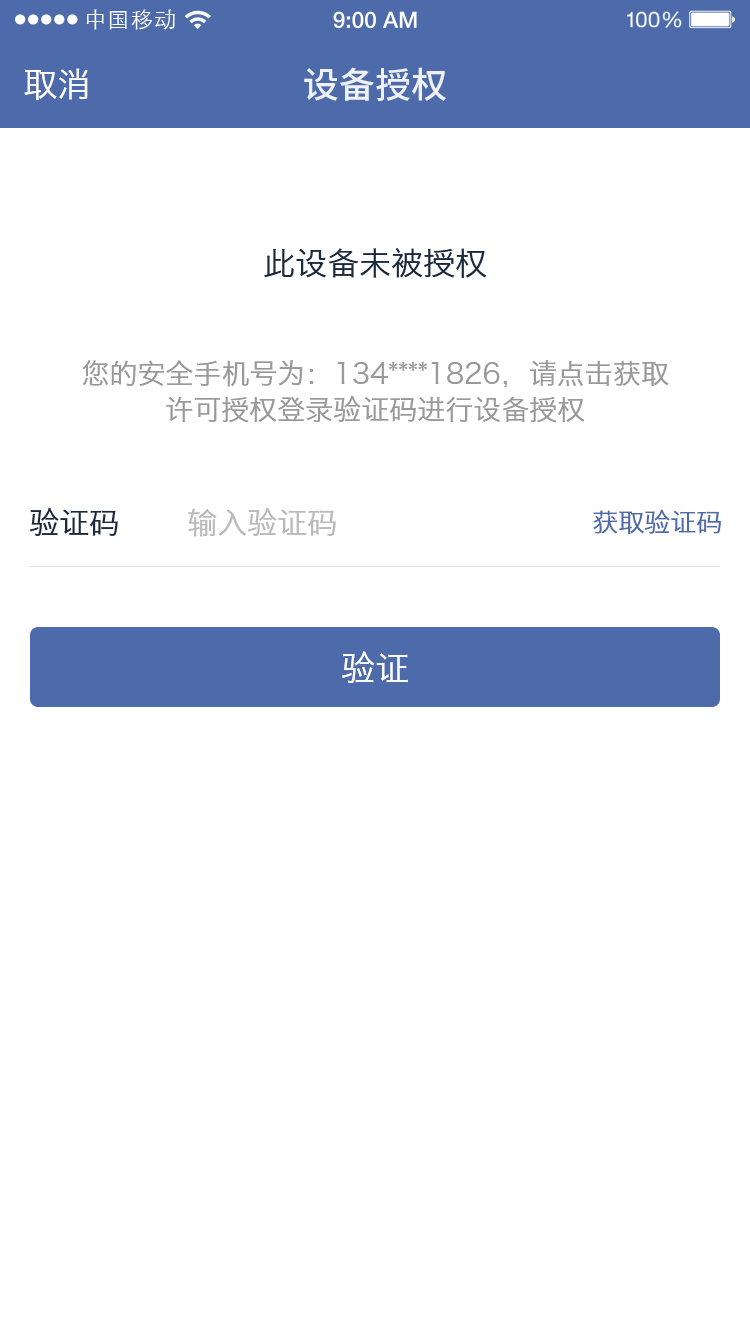
<style>
.page{position:relative;width:750px;height:1334px;background:#ffffff}
.page>*{position:absolute;margin:0}
.t1{font:21.9px "STXihei";letter-spacing:0.04em;color:#ffffff}
.t2{font:34px "HiraginoSansGB-W3";color:#ffffff}
.t3{font:36px "NotoSansHans-Medium";color:#eef1f6}
.t4{font:32px "HiraginoSansGB-W3";color:#1a293e}
.t5{font:28px/36px "HiraginoSansGB-W3";color:#999999}
.t6{font:30px "HiraginoSansGB-W3";color:#1a293e}
.t7{font:30px "HiraginoSansGB-W3";color:#bababa}
.t8{font:26px "HiraginoSansGB-W3";color:#4d6bab}
</style>
<div class="page">
<p class="t1" style="left:86px;top:9px;width:89px;height:21px">中国移动</p>
<p class="t2" style="left:24px;top:68px;width:64px;height:32px">取消</p>
<p class="t3" style="left:304px;top:67px;width:142px;height:34px">设备授权</p>
<p class="t4" style="left:264px;top:248px;width:223px;height:30px">此设备未被授权</p>
<p class="t5" style="left:82px;top:360px;width:587px;height:63px;text-align:center">您的安全手机号为：134****1826，请点击获取<br>许可授权登录验证码进行设备授权</p>
<p class="t6" style="left:30px;top:507px;width:88px;height:29px">验证码</p>
<p class="t7" style="left:188px;top:507px;width:148px;height:30px">输入验证码</p>
<p class="t8" style="left:593px;top:509px;width:128px;height:25px">获取验证码</p>
<p class="t2" style="left:342px;top:651px;width:66px;height:32px">验证</p>
</div>
